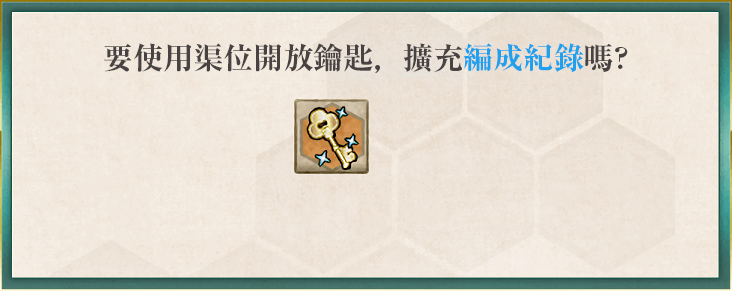
<style>
.page{position:relative;width:732px;height:291px}
.page>*{position:absolute;margin:0}
.t1{font:30px "RyuminPr6N-ExBold";color:#484342}
.t2{font:30px "RyuminPr6N-ExBold";color:#21a0ee}
</style>
<div class="page">
<p class="t1" style="left:104px;top:43px;width:524px;height:31px">要使用渠位開放鑰匙，擴充<span class="t2">編成紀錄</span>嗎?</p>
</div>
